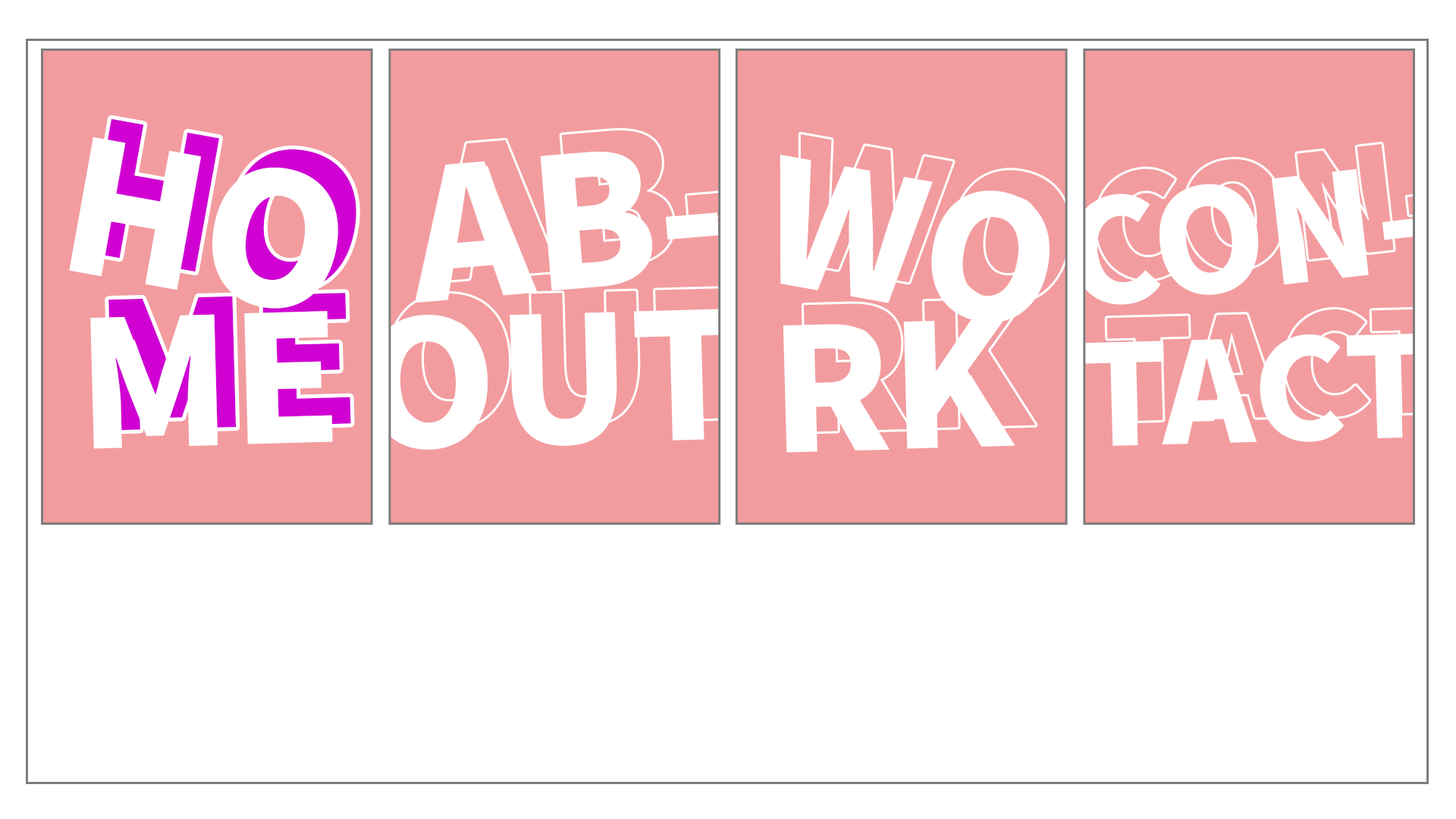
<style>
.page{position:relative;width:1456px;height:819px;background:#ffffff}
.page>*{position:absolute;margin:0}
.t1{font:182.1px "NotoSansKR-Black"}
.t2{font:182.1px "NotoSansKR-Black";color:#ffffff}
.t3{font:181.5px "NotoSansKR-Black";color:#ffffff}
.t4{font:170.5px "NotoSansKR-Black";color:#ffffff}
.t5{font:143.1px "NotoSansKR-Black";color:#ffffff}
.t6{font:175.6px "NotoSansKR-Black"}
.t7{font:175.6px "NotoSansKR-Black";color:#ffffff}
.t8{font:174.5px "NotoSansKR-Black";color:#ffffff}
.t9{font:139.1px "NotoSansKR-Black";color:#ffffff}
</style>
<div class="page">
<p class="t1" style="left:87px;top:118px;width:269px;height:172px;rotate:10deg">HO</p>
<p class="t2" style="left:69px;top:136px;width:269px;height:173px;rotate:10deg">HO</p>
<p class="t3" style="left:415px;top:151px;width:305px;height:152px;rotate:-5deg">AB-</p>
<p class="t4" style="left:780px;top:154px;width:270px;height:169px;rotate:10deg">WO</p>
<p class="t5" style="left:1071px;top:168px;width:354px;height:137px;rotate:-7deg">CON-</p>
<p class="t6" style="left:108px;top:293px;width:243px;height:138px;rotate:-2deg">ME</p>
<p class="t7" style="left:90px;top:311px;width:243px;height:138px;rotate:-2deg">ME</p>
<p class="t8" style="left:368px;top:309px;width:369px;height:141px;rotate:-2deg">OUT</p>
<p class="t4" style="left:783px;top:318px;width:232px;height:135px;rotate:-2deg">RK</p>
<p class="t9" style="left:1081px;top:333px;width:348px;height:113px;rotate:-2deg">TACT</p>
</div>
